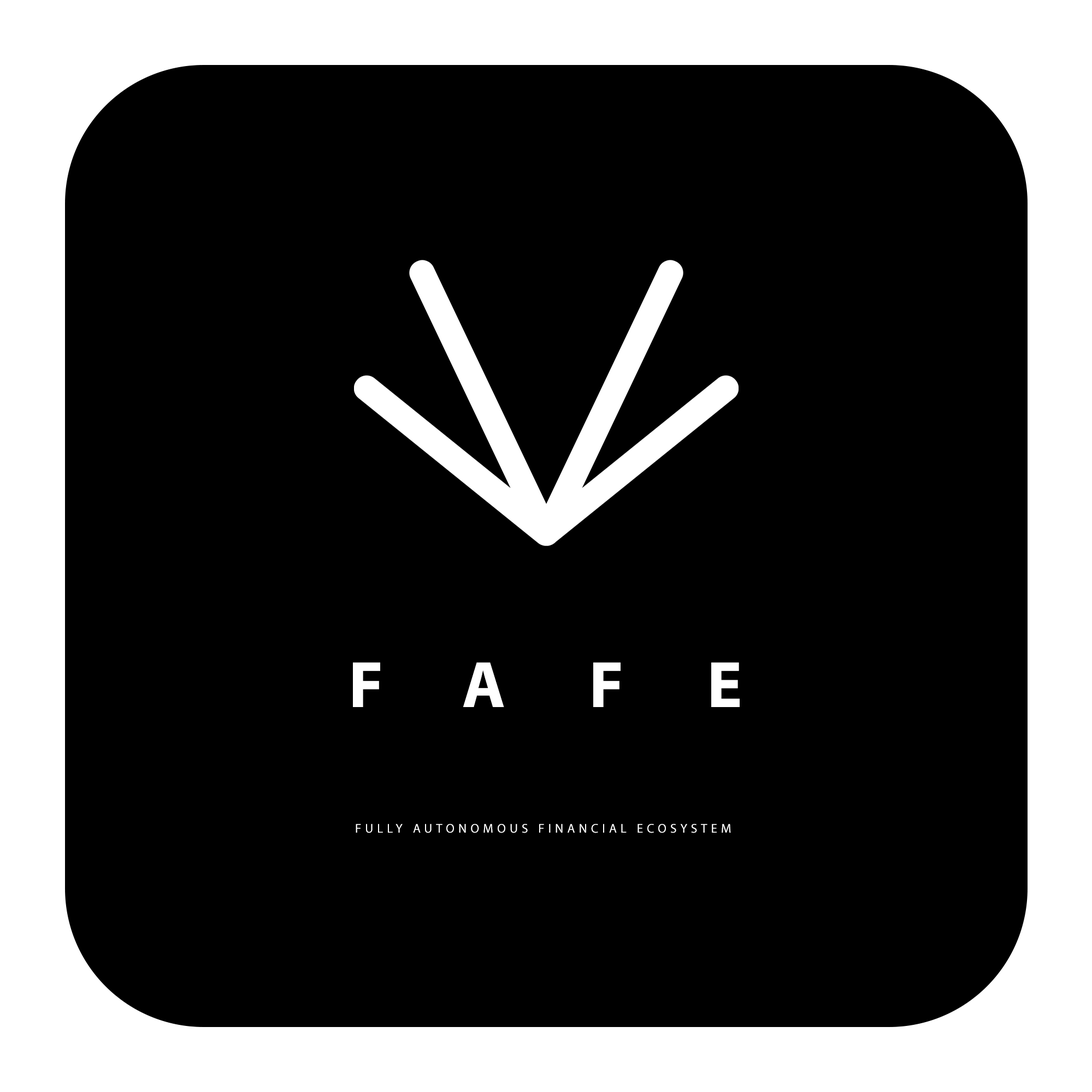
<style>
.page{position:relative;width:1092px;height:1092px;background:#000000}
.page>*{position:absolute;margin:0}
.t1{font:66px "MyriadPro-Bold";letter-spacing:1.26em;color:#ffffff}
.t2{font:12.7px "MyriadPro-Regular";letter-spacing:0.3em;color:#ffffff}
.t3{font:12.7px "MyriadPro-Regular";letter-spacing:0.66em;color:#ffffff}
</style>
<div class="page">
<p class="t1" style="left:353px;top:662px;width:386px;height:45px">FAFE</p>
<p class="t2" style="left:356px;top:824px;width:375px;height:9px">FULLY AUTONOMOUS FINANCIAL ECOSYSTE<span class="t3">M</span></p>
</div>
